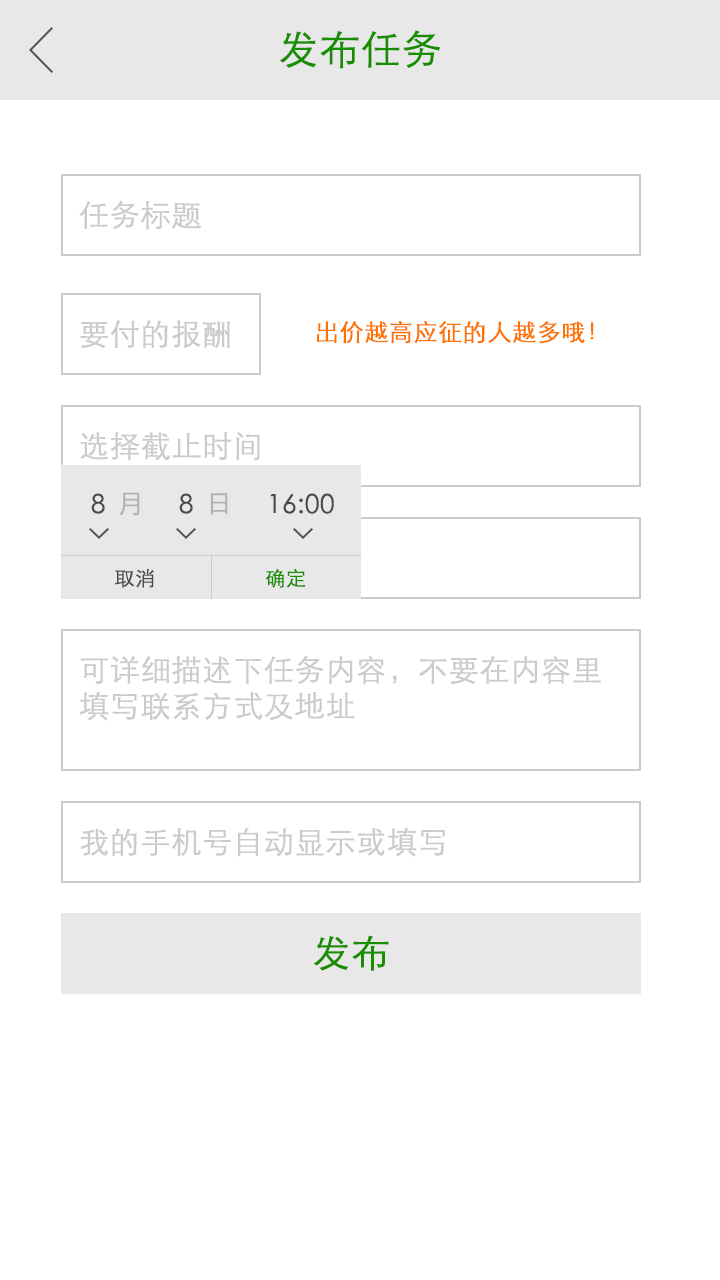
<style>
.page{position:relative;width:720px;height:1280px;background:#ffffff}
.page>*{position:absolute;margin:0}
.t1{font:40px "STXihei";color:#178d00;font-weight:bold}
.t2{font:30px "STXihei";color:#cbcbcb;font-weight:bold}
.t3{font:24px "STXihei";color:#ff7200;font-weight:bold}
.t4{font:26px "STXihei";color:#4a4a4a;font-weight:bold}
.t5{font:26px "STXihei";color:#b1b1b1;font-weight:bold}
.t6{font:20px "STXihei";color:#4a4a4a;font-weight:bold}
.t7{font:20px "STXihei";color:#178d00;font-weight:bold}
.t8{font:30px/36px "STXihei";color:#cbcbcb;font-weight:bold}
.t9{font:38px "STXihei";color:#178d00;font-weight:bold}
</style>
<div class="page">
<p class="t1" style="left:280px;top:30px;width:161px;height:39px">发布任务</p>
<p class="t2" style="left:79px;top:200px;width:122px;height:30px">任务标题</p>
<p class="t2" style="left:80px;top:320px;width:151px;height:28px">要付的报酬</p>
<p class="t3" style="left:317px;top:321px;width:277px;height:23px">出价越高应征的人越多哦！</p>
<p class="t2" style="left:80px;top:432px;width:180px;height:29px">选择截止时间</p>
<p class="t4" style="left:91px;top:493px;width:14px;height:21px">8</p>
<p class="t5" style="left:119px;top:492px;width:21px;height:24px">月</p>
<p class="t4" style="left:179px;top:493px;width:14px;height:21px">8</p>
<p class="t5" style="left:210px;top:493px;width:18px;height:22px">日</p>
<p class="t4" style="left:270px;top:493px;width:64px;height:21px">16:00</p>
<p class="t6" style="left:115px;top:569px;width:39px;height:19px">取消</p>
<p class="t7" style="left:266px;top:569px;width:40px;height:19px">确定</p>
<p class="t8" style="left:79px;top:655px;width:522px;height:66px;text-align:justify">可详细描述下任务内容，不要在内容里<br>填写联系方式及地址</p>
<p class="t2" style="left:80px;top:827px;width:365px;height:30px">我的手机号自动显示或填写</p>
<p class="t9" style="left:314px;top:935px;width:75px;height:36px">发布</p>
</div>
